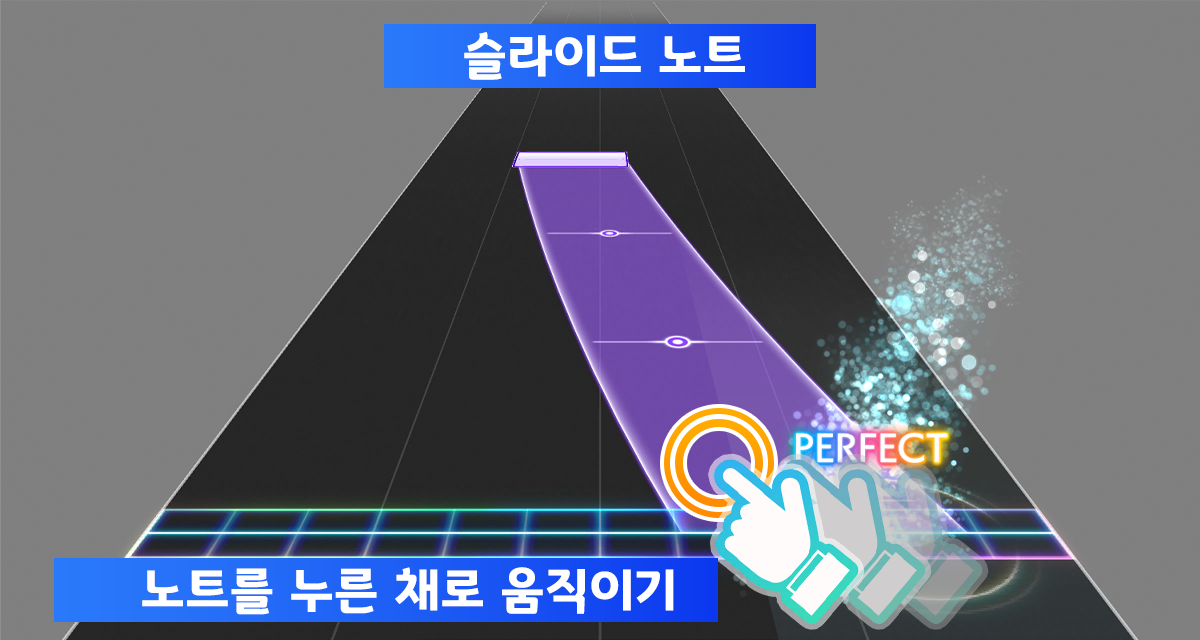
<style>
.page{position:relative;width:1200px;height:640px;background:#808080}
.page>*{position:absolute;margin:0}
.t1{font:50.7px "GyeonggiTitleB";letter-spacing:0.03em;color:#ffffff}
</style>
<div class="page">
<p class="t1" style="left:464px;top:32px;width:281px;height:48px">슬라이드 노트</p>
<p class="t1" style="left:142px;top:567px;width:532px;height:48px">노트를 누른 채로 움직이기</p>
</div>
